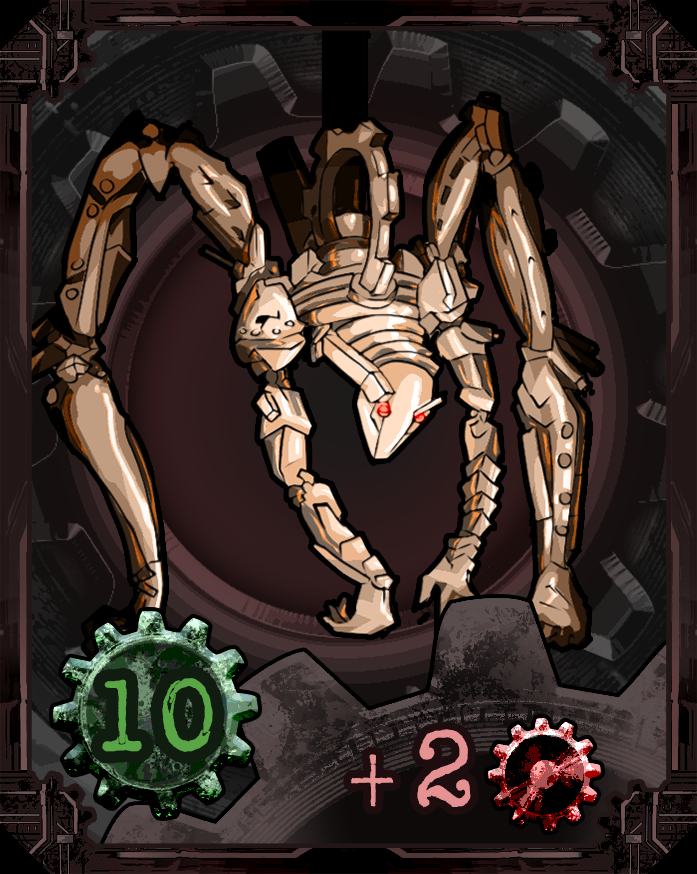
<style>
.page{position:relative;width:697px;height:874px}
.page>*{position:absolute;margin:0}
.t1{font:108.3px "AmerTypewriterITCbyBT-Medium";color:#5aa647}
.t2{font:85.8px "AmerTypewriterITCbyBT-Medium";color:#e69192}
.t3{font:114.4px "AmerTypewriterITCbyBT-Medium";color:#e69192}
</style>
<div class="page">
<p class="t1" style="left:102px;top:678px;width:111px;height:74px">10</p>
<p class="t2" style="left:351px;top:729px;width:120px;height:79px">+<span class="t3">2</span></p>
</div>
